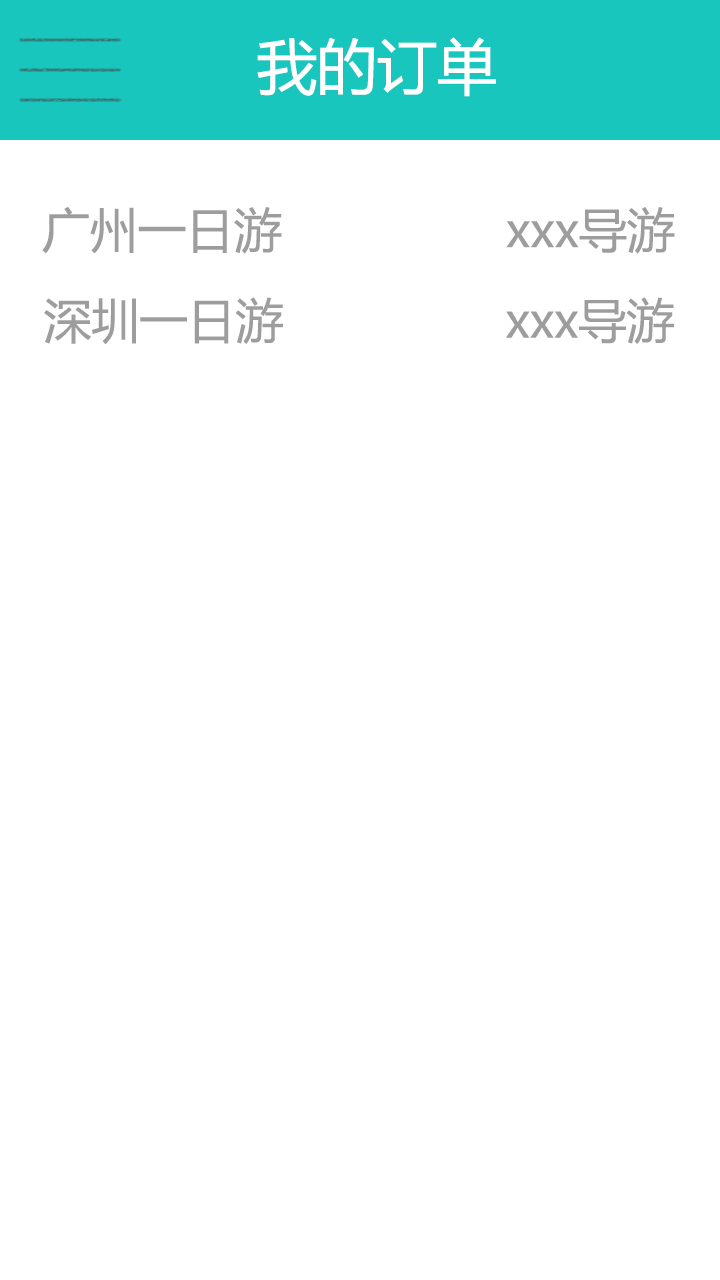
<style>
.page{position:relative;width:720px;height:1280px;background:#ffffff}
.page>*{position:absolute;margin:0}
.t1{font:60px "MicrosoftYaHei";color:#ffffff}
.t2{font:48px "MicrosoftYaHei";color:#9d9d9d}
</style>
<div class="page">
<p class="t1" style="left:257px;top:37px;width:239px;height:60px">我的订单</p>
<p class="t2" style="left:42px;top:206px;width:240px;height:48px">广州一日游</p>
<p class="t2" style="left:506px;top:207px;width:169px;height:47px">xxx导游</p>
<p class="t2" style="left:44px;top:297px;width:239px;height:48px">深圳一日游</p>
<p class="t2" style="left:506px;top:297px;width:168px;height:47px">xxx导游</p>
</div>
